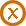
<style>
.page{position:relative;width:26px;height:26px;background:#ffffff}
.page>*{position:absolute;margin:0}
.t1{font:19.7px "JSTinaas";color:#cb6d01;scale:0.84 1}
</style>
<div class="page">
<p class="t1" style="left:8px;top:8px;width:10px;height:12px">X</p>
</div>
